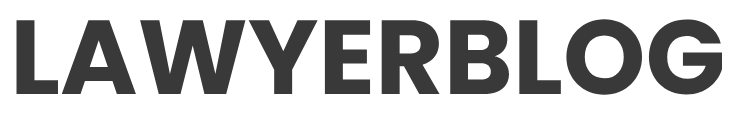
<style>
.page{position:relative;width:738px;height:114px;background:#ffffff}
.page>*{position:absolute;margin:0}
.t1{font:105px "Poppins-Bold";color:#393939}
</style>
<div class="page">
<p class="t1" style="left:16px;top:19px;width:707px;height:76px">LAWYERBLOG</p>
</div>
